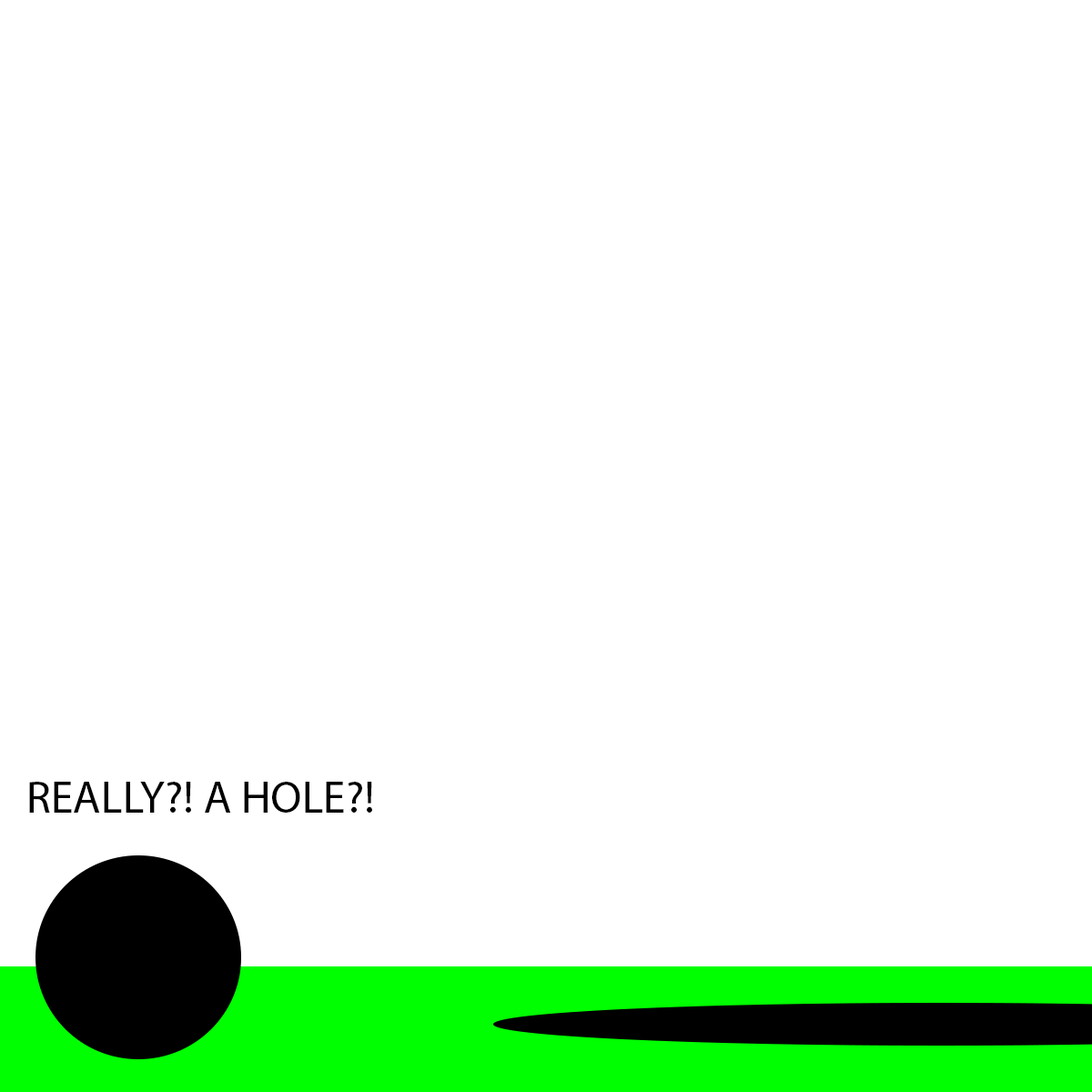
<style>
.page{position:relative;width:1092px;height:1092px;background:#ffffff}
.page>*{position:absolute;margin:0}
.t1{font:45.5px "MyriadPro-Regular";color:#000000}
</style>
<div class="page">
<p class="t1" style="left:29px;top:782px;width:343px;height:31px">REALLY?! A HOLE?!</p>
</div>
